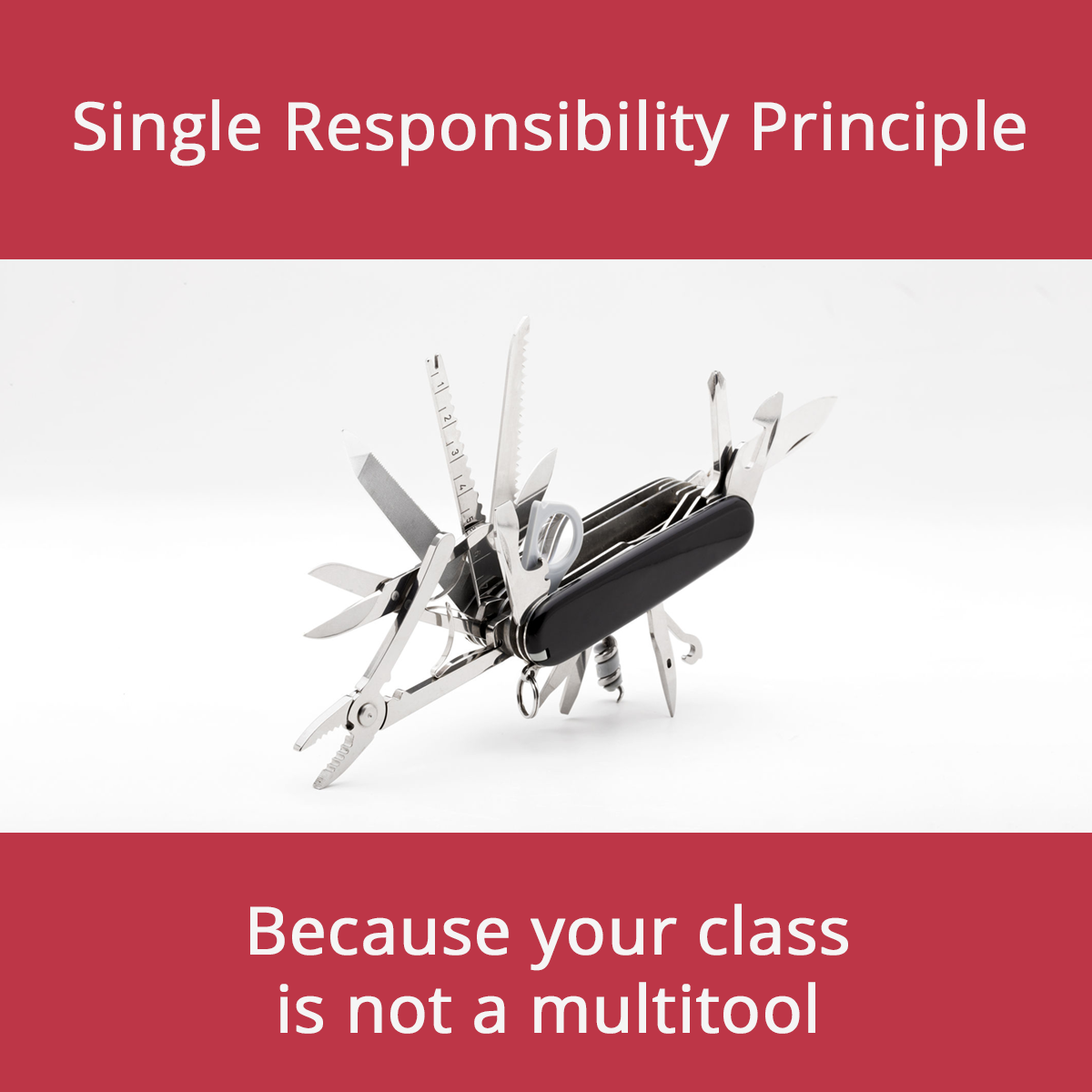
<style>
.page{position:relative;width:1092px;height:1092px;background:#bd3647}
.page>*{position:absolute;margin:0}
.t1{font:65.5px "OpenSans";color:#f5f5f5;font-weight:bold}
</style>
<div class="page">
<p class="t1" style="left:74px;top:99px;width:952px;height:68px">Single Responsibility Principle</p>
<p class="t1" style="left:250px;top:904px;width:598px;height:130px;text-align:center">Because your class<br>is not a multitool</p>
</div>
